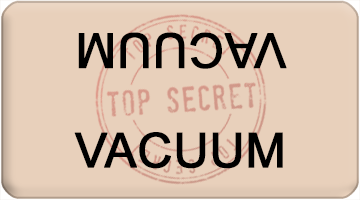
<style>
.page{position:relative;width:360px;height:200px;background:#e8d0bb}
.page>*{position:absolute;margin:0}
.t1{font:48px "ArialMT";color:#000000;font-weight:bold}
</style>
<div class="page">
<p class="t1" style="left:78px;top:32px;width:209px;height:37px;rotate:180deg">VACUUM</p>
<p class="t1" style="left:74px;top:132px;width:209px;height:37px">VACUUM</p>
</div>
